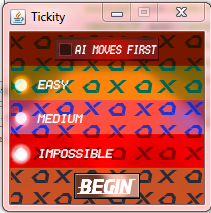
<style>
.page{position:relative;width:211px;height:213px}
.page>*{position:absolute;margin:0}
.t1{font:10px "Terminal";color:#ffffff;font-style:italic}
.t2{font:18.7px "EarthKid";color:#fefefe;font-style:italic}
</style>
<div class="page">
<p class="t1" style="left:37px;top:80px;width:32px;height:9px">EASY</p>
<p class="t1" style="left:37px;top:114px;width:46px;height:9px">MEDIUM</p>
<p class="t1" style="left:39px;top:149px;width:75px;height:9px">IMPOSSIBLE</p>
<p class="t2" style="left:79px;top:179px;width:54px;height:15px">Begin</p>
</div>
